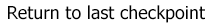
<style>
.page{position:relative;width:209px;height:27px;background:#ffffff}
.page>*{position:absolute;margin:0}
.t1{font:18px "Tahoma";color:#000000}
</style>
<div class="page">
<p class="t1" style="left:8px;top:5px;width:197px;height:18px">Return to last checkpoint</p>
</div>
